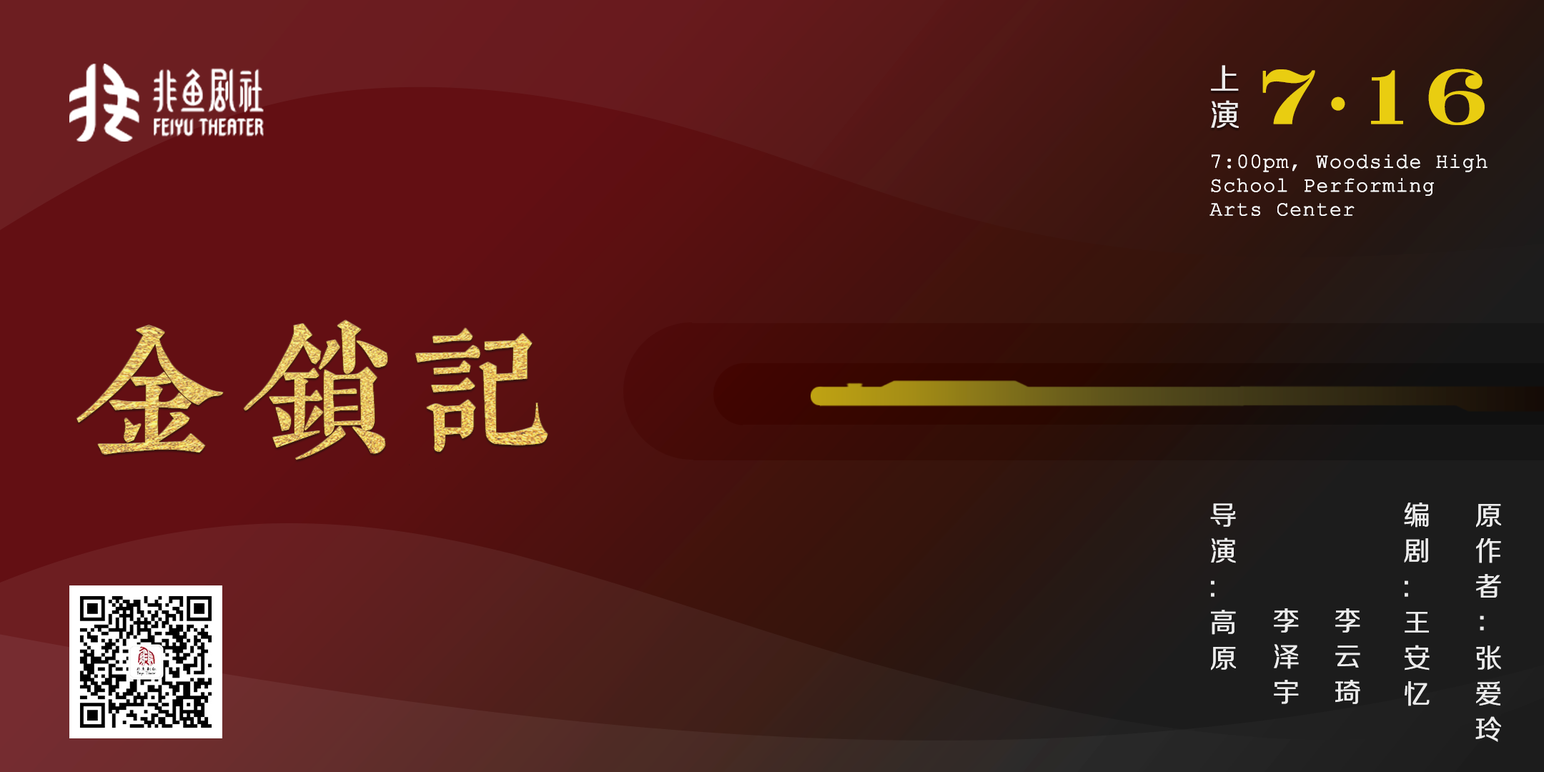
<style>
.page{position:relative;width:1544px;height:772px}
.page>*{position:absolute;margin:0}
.t1{font:29.8px/35.7px "FZZHJW--GB1-0";letter-spacing:0.1em;color:#ffffff;font-weight:bold}
.t2{font:78.7px "CrawModURW-Bol";letter-spacing:0.1em;color:#d7b60e;font-weight:bold}
.t3{font:20.9px/23.8px "CourierNewPSMT";letter-spacing:0.01em;color:#ffffff;font-weight:bold}
.t4{font:140.9px "WenYue-GuDianMingChaoTi-NC-W5";letter-spacing:0.15em;font-weight:bold}
.t5{font:26.8px/35.7px "FZZHJW--GB1-0";letter-spacing:0.1em;color:#dcdcdc;font-weight:bold}
</style>
<div class="page">
<p class="t1" style="left:1211px;top:65px;width:28px;height:63px;opacity:0.79">上<br>演</p>
<p class="t2" style="left:1263px;top:69px;width:222px;height:56px">7•16</p>
<p class="t3" style="left:1210px;top:154px;width:278px;height:62px">7:00pm, Woodside High <br>School Performing <br>Arts Center</p>
<p class="t4" style="left:77px;top:320px;width:471px;height:140px">金锁记</p>
<p class="t5" style="left:1210px;top:503px;width:26px;height:168px">导<br>演<br>:<br>高 <br>原</p>
<p class="t5" style="left:1404px;top:503px;width:26px;height:203px">编<br>剧<br>:<br>王<br>安<br>忆</p>
<p class="t5" style="left:1476px;top:504px;width:25px;height:238px">原<br>作<br>者<br>：<br>张<br>爱<br>玲</p>
<p class="t5" style="left:1274px;top:608px;width:25px;height:96px">李<br>泽<br>宇</p>
<p class="t5" style="left:1336px;top:608px;width:25px;height:96px">李<br>云<br>琦</p>
</div>
